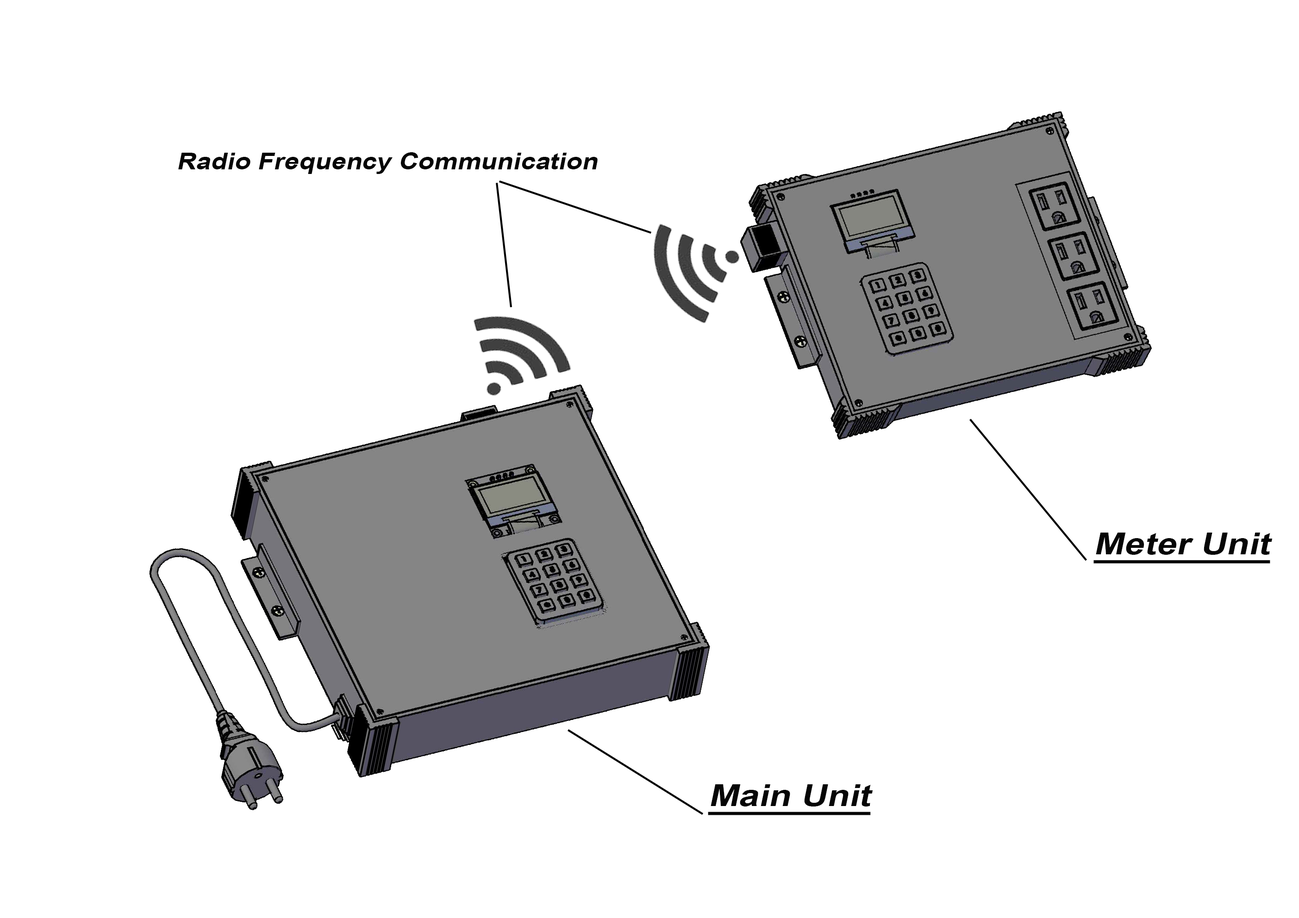
<style>
.page{position:relative;width:1299px;height:918px;background:#ffffff}
.page>*{position:absolute;margin:0}
.t1{font:23.2px "Arial-BoldMT";color:#060606;font-style:italic;scale:1.14 1}
.t2{font:30.7px "Arial-BoldMT";color:#060606;font-style:italic;text-decoration:underline;scale:1.17 1}
</style>
<div class="page">
<p class="t1" style="left:178px;top:152px;width:419px;height:22px">Radio Frequency Communication</p>
<p class="t2" style="left:1093px;top:533px;width:179px;height:31px">Meter Unit</p>
<p class="t2" style="left:708px;top:784px;width:165px;height:31px">Main Unit</p>
</div>
